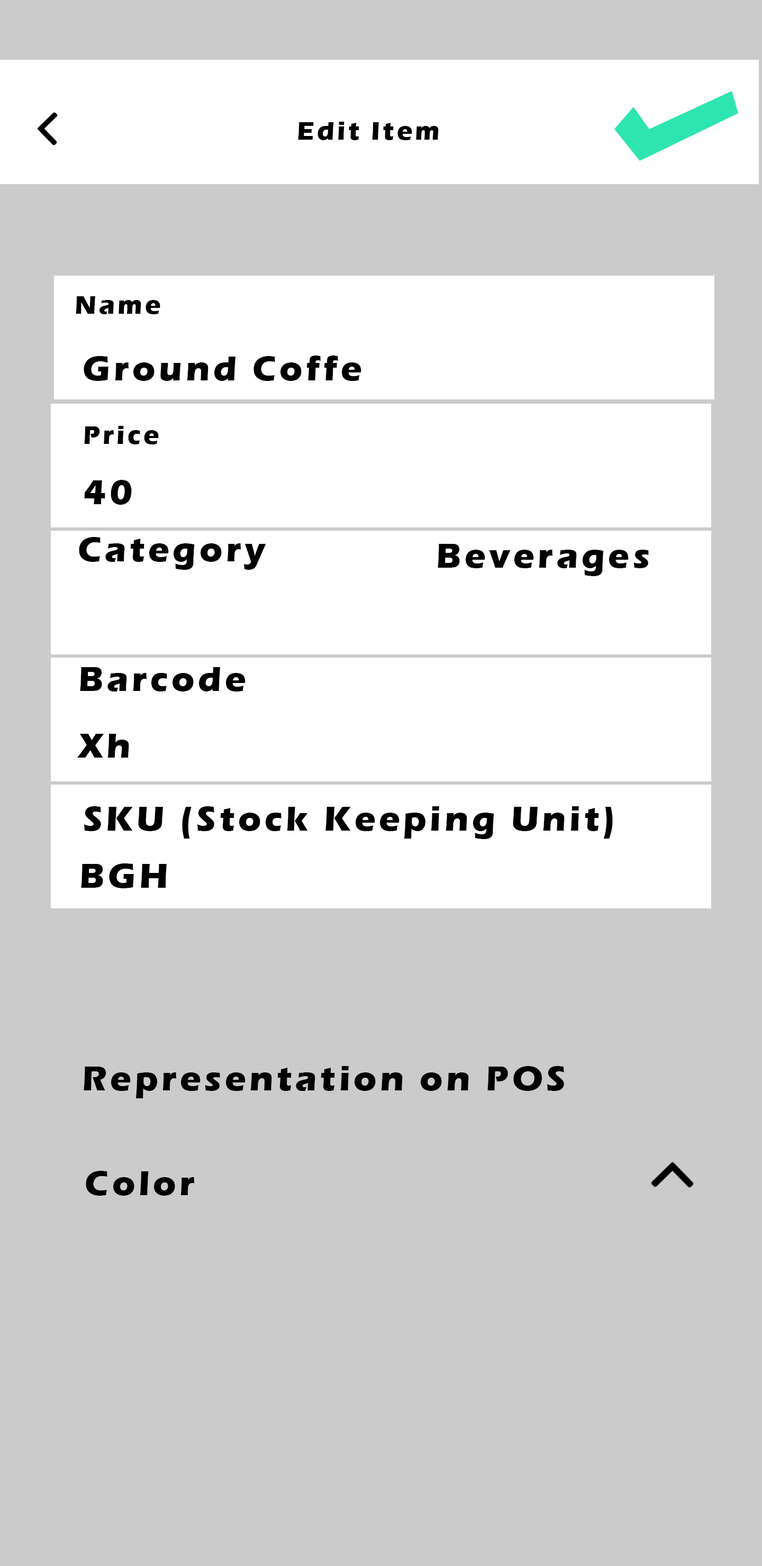
<style>
.page{position:relative;width:762px;height:1566px;background:#cbcbcb}
.page>*{position:absolute;margin:0}
.t1{font:26.4px "ErasITC-Bold";letter-spacing:0.1em;color:#000000}
.t2{font:35.3px "ErasITC-Bold";letter-spacing:0.1em;color:#000000}
</style>
<div class="page">
<p class="t1" style="left:298px;top:122px;width:140px;height:18px">Edit Item</p>
<p class="t1" style="left:76px;top:296px;width:84px;height:18px">Name</p>
<p class="t2" style="left:84px;top:355px;width:277px;height:26px">Ground Coffe</p>
<p class="t1" style="left:84px;top:426px;width:75px;height:18px">Price</p>
<p class="t2" style="left:84px;top:480px;width:48px;height:25px">40</p>
<p class="t2" style="left:79px;top:537px;width:187px;height:33px">Category</p>
<p class="t2" style="left:437px;top:544px;width:211px;height:32px">Beverages</p>
<p class="t2" style="left:80px;top:667px;width:165px;height:24px">Barcode</p>
<p class="t2" style="left:77px;top:734px;width:52px;height:23px">Xh</p>
<p class="t2" style="left:84px;top:806px;width:528px;height:33px">SKU (Stock Keeping Unit)</p>
<p class="t2" style="left:81px;top:863px;width:86px;height:25px">BGH</p>
<p class="t2" style="left:84px;top:1066px;width:480px;height:32px">Representation on POS</p>
<p class="t2" style="left:86px;top:1170px;width:108px;height:25px">Color</p>
</div>
